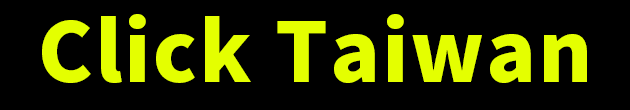
<style>
.page{position:relative;width:630px;height:110px;background:#000000}
.page>*{position:absolute;margin:0}
.t1{font:82.4px "NotoSansCJKtc-Black";letter-spacing:0.025em;color:#e4ff00}
</style>
<div class="page">
<p class="t1" style="left:42px;top:14px;width:545px;height:69px">Click Taiwan</p>
</div>
